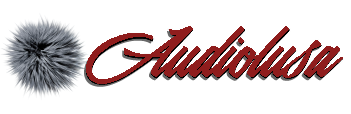
<style>
.page{position:relative;width:351px;height:114px;background:#ffffff}
.page>*{position:absolute;margin:0}
.t1{font:85px "Valencia";color:#8f1d1d}
</style>
<div class="page">
<p class="t1" style="left:84px;top:28px;width:257px;height:59px">Audiolusa</p>
<p class="t1" style="left:86px;top:26px;width:257px;height:58px">Audiolusa</p>
</div>
